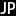
<style>
.page{position:relative;width:16px;height:16px;background:#000000}
.page>*{position:absolute;margin:0}
.t1{font:16.7px "MyriadPro-Regular";color:#ffffff}
</style>
<div class="page">
<p class="t1" style="left:0px;top:2px;width:15px;height:12px">JP</p>
</div>
